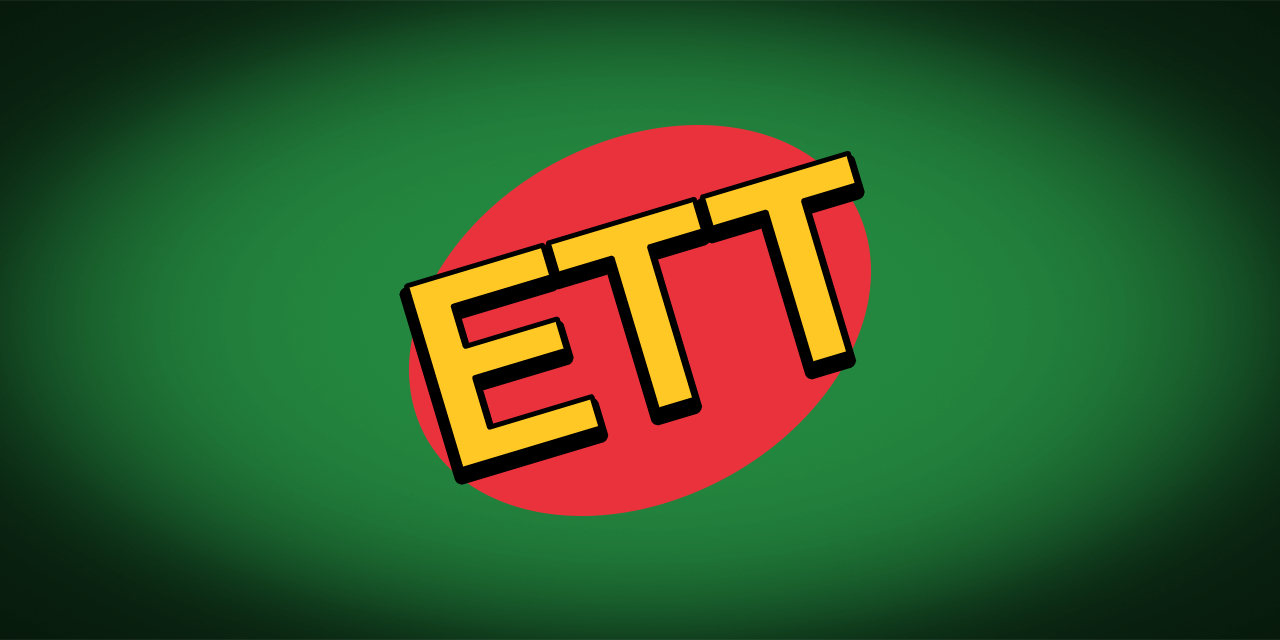
<style>
.page{position:relative;width:1280px;height:640px}
.page>*{position:absolute;margin:0}
.t1{font:267.2px "Arial-BoldMT";letter-spacing:-0.01em;color:#ffc825}
.t2{font:267.2px "Arial-BoldMT";letter-spacing:-0.06em;color:#ffc825}
</style>
<div class="page">
<p class="t1" style="left:406px;top:153px;width:452px;height:317px;rotate:-17deg"><span class="t2">E</span>TT</p>
</div>
